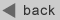
<style>
.page{position:relative;width:60px;height:20px;background:#cccccc}
.page>*{position:absolute;margin:0}
.t1{font:24px "ArialMT";letter-spacing:0.05em;color:#333333}
</style>
<div class="page">
<p class="t1" style="left:24px;top:5px;width:31px;height:10px">back</p>
</div>
